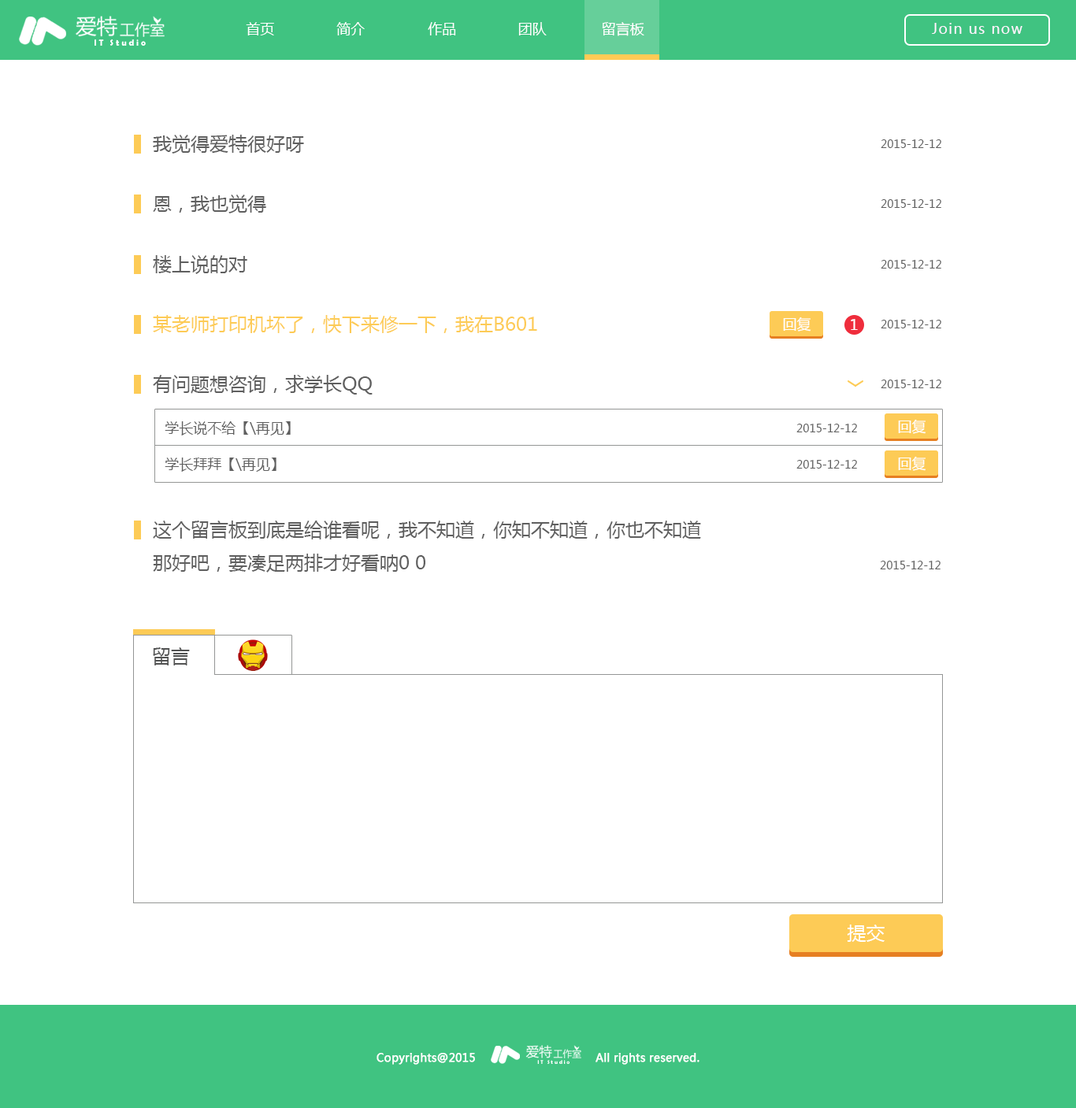
<style>
.page{position:relative;width:1076px;height:1108px;background:#ffffff}
.page>*{position:absolute;margin:0}
.t1{font:14.2px "MicrosoftYaHei";color:#ffffff}
.t2{font:14.2px "MicrosoftYaHei";letter-spacing:0.075em;color:#fff4ff}
.t3{font:8.8px "BerlinSansFBDemi-Bold";color:#ffffff}
.t4{font:18.9px "MicrosoftYaHei";color:#5f5f5f}
.t5{font:11px "MicrosoftYaHei";color:#5f5f5f}
.t6{font:18.9px "MicrosoftYaHei";color:#fdcb56}
.t7{font:14.2px "MicrosoftYaHei";color:#5f5f5f}
.t8{font:18.9px "MicrosoftYaHei";color:#525353}
.t9{font:18.9px "MicrosoftYaHei";color:#ffffff}
.t10{font:11px "MicrosoftYaHei";color:#ffffff;font-weight:bold}
.t11{font:5.6px "BerlinSansFBDemi-Bold";color:#ffffff}
</style>
<div class="page">
<p class="t1" style="left:246px;top:22px;width:28px;height:13px">首页</p>
<p class="t1" style="left:336px;top:22px;width:29px;height:13px">简介</p>
<p class="t1" style="left:428px;top:22px;width:28px;height:13px">作品</p>
<p class="t1" style="left:518px;top:22px;width:29px;height:13px">团队</p>
<p class="t1" style="left:602px;top:22px;width:42px;height:14px">留言板</p>
<p class="t2" style="left:932px;top:23px;width:90px;height:11px">Join us now</p>
<p class="t3" style="left:95px;top:39px;width:51px;height:7px">I T   S t u d i o</p>
<p class="t4" style="left:153px;top:135px;width:151px;height:19px">我觉得爱特很好呀</p>
<p class="t5" style="left:881px;top:139px;width:60px;height:9px">2015-12-12</p>
<p class="t4" style="left:153px;top:195px;width:113px;height:18px">恩，我也觉得</p>
<p class="t5" style="left:881px;top:199px;width:60px;height:9px">2015-12-12</p>
<p class="t4" style="left:153px;top:255px;width:94px;height:19px">楼上说的对</p>
<p class="t5" style="left:881px;top:260px;width:60px;height:9px">2015-12-12</p>
<p class="t6" style="left:153px;top:315px;width:384px;height:18px">某老师打印机坏了，快下来修一下，我在B601</p>
<p class="t1" style="left:783px;top:317px;width:28px;height:15px">回复</p>
<p class="t1" style="left:851px;top:319px;width:7px;height:11px">1</p>
<p class="t5" style="left:881px;top:320px;width:60px;height:8px">2015-12-12</p>
<p class="t4" style="left:153px;top:375px;width:220px;height:20px">有问题想咨询，求学长QQ</p>
<p class="t5" style="left:881px;top:380px;width:60px;height:8px">2015-12-12</p>
<p class="t7" style="left:165px;top:421px;width:126px;height:15px">学长说不给【\再见】</p>
<p class="t5" style="left:796px;top:424px;width:61px;height:8px">2015-12-12</p>
<p class="t1" style="left:898px;top:419px;width:28px;height:15px">回复</p>
<p class="t7" style="left:165px;top:458px;width:111px;height:14px">学长拜拜【\再见】</p>
<p class="t5" style="left:796px;top:460px;width:61px;height:9px">2015-12-12</p>
<p class="t1" style="left:898px;top:456px;width:28px;height:15px">回复</p>
<p class="t4" style="left:153px;top:521px;width:548px;height:52px">这个留言板到底是给谁看呢，我不知道，你知不知道，你也不知道<br>那好吧，要凑足两排才好看呐0 0</p>
<p class="t5" style="left:880px;top:561px;width:60px;height:8px">2015-12-12</p>
<p class="t8" style="left:153px;top:647px;width:37px;height:19px">留言</p>
<p class="t9" style="left:847px;top:925px;width:38px;height:17px">提交</p>
<p class="t10" style="left:377px;top:1053px;width:98px;height:12px">Copyrights@2015</p>
<p class="t11" style="left:537px;top:1060px;width:32px;height:4px">I T   S t u d i o</p>
<p class="t10" style="left:595px;top:1053px;width:104px;height:12px">All rights reserved.</p>
</div>
